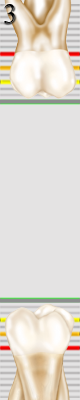
<style>
.page{position:relative;width:80px;height:400px;background:#e4e3e3}
.page>*{position:absolute;margin:0}
.t1{font:28.4px "TimesNewRomanPSMT";letter-spacing:0.005em;color:#000000}
</style>
<div class="page">
<p class="t1" style="left:4px;top:4px;width:11px;height:20px">3</p>
</div>
